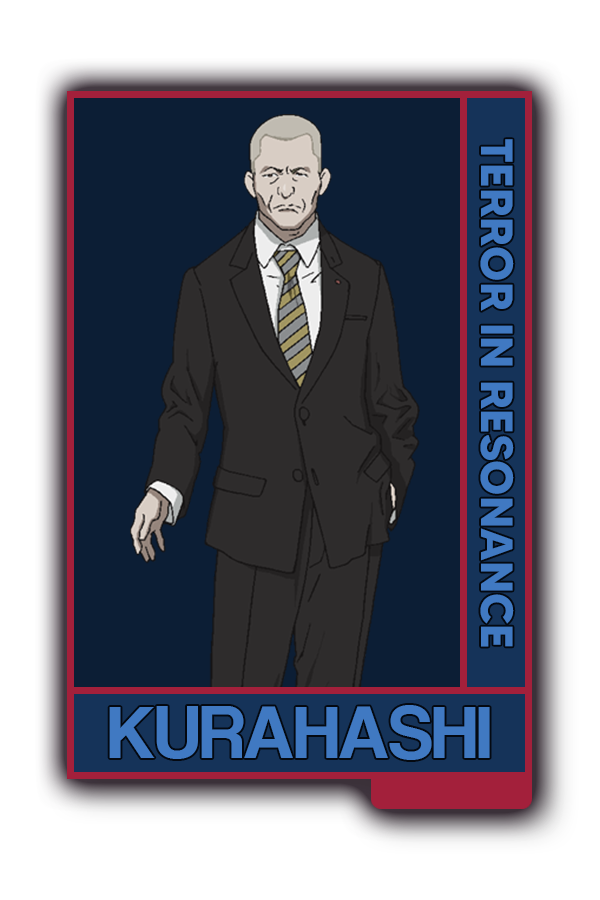
<style>
.page{position:relative;width:600px;height:900px;background:#0c1e35}
.page>*{position:absolute;margin:0}
.t1{font:45.2px "MADETOMMY-Bold";color:#4079c2}
.t2{font:77px "CoolveticaRg-Regular";color:#4079c2}
</style>
<div class="page">
<p class="t1" style="left:480px;top:139px;width:34px;height:508px;rotate:90deg">TERROR IN RESONANCE</p>
<p class="t2" style="left:109px;top:705px;width:381px;height:55px">KURAHASHI</p>
</div>
